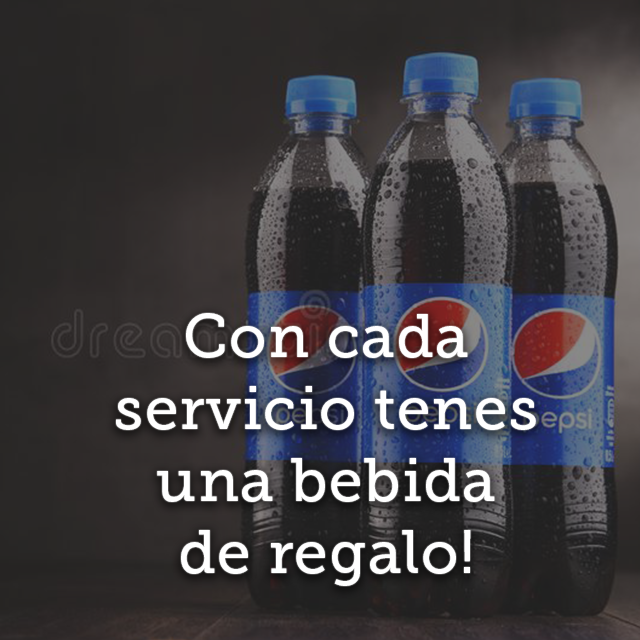
<style>
.page{position:relative;width:640px;height:640px}
.page>*{position:absolute;margin:0}
.t1{font:60.2px "MuseoSlab-500";letter-spacing:0.02em;color:#ffffff}
</style>
<div class="page">
<p class="t1" style="left:116px;top:313px;width:420px;height:273px;text-align:center">Con cada<br>servicio tenes<br>una bebida<br>de regalo!</p>
</div>
